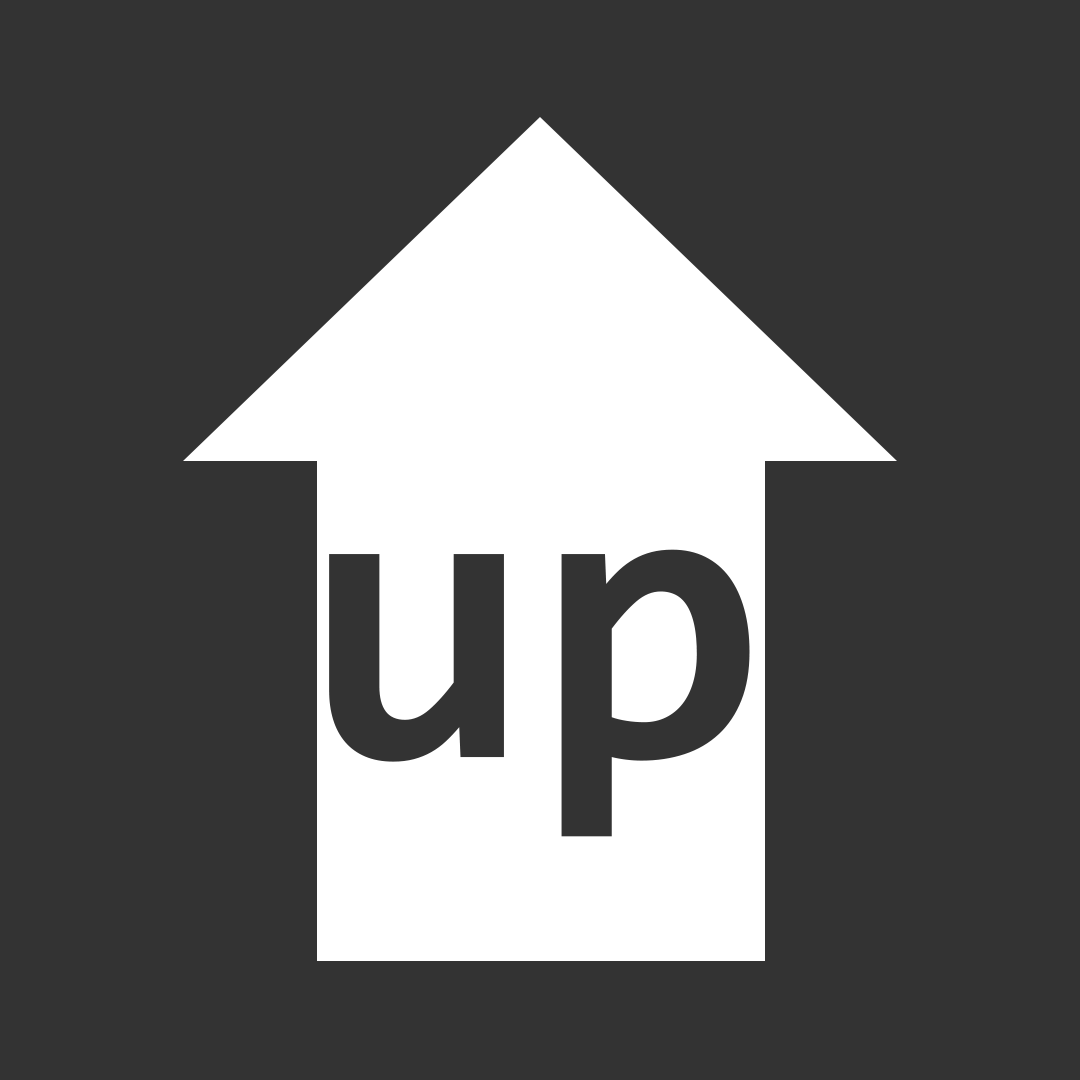
<style>
.page{position:relative;width:1080px;height:1080px;background:#333333}
.page>*{position:absolute;margin:0}
.t1{font:408.8px "Consolas-Bold";color:#333333;scale:1.03 1}
</style>
<div class="page">
<p class="t1" style="left:329px;top:549px;width:421px;height:288px">up</p>
</div>
